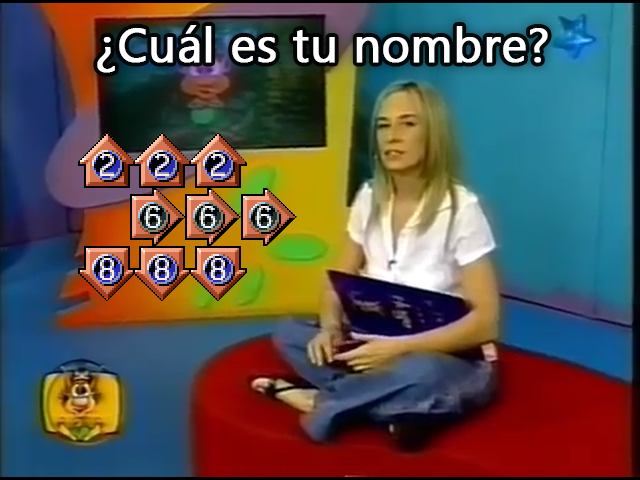
<style>
.page{position:relative;width:640px;height:480px}
.page>*{position:absolute;margin:0}
.t1{font:48px "SegoeUI";color:#ffffff;font-weight:bold}
</style>
<div class="page">
<p class="t1" style="left:97px;top:25px;width:451px;height:48px">¿Cuál es tu nombre?</p>
</div>
